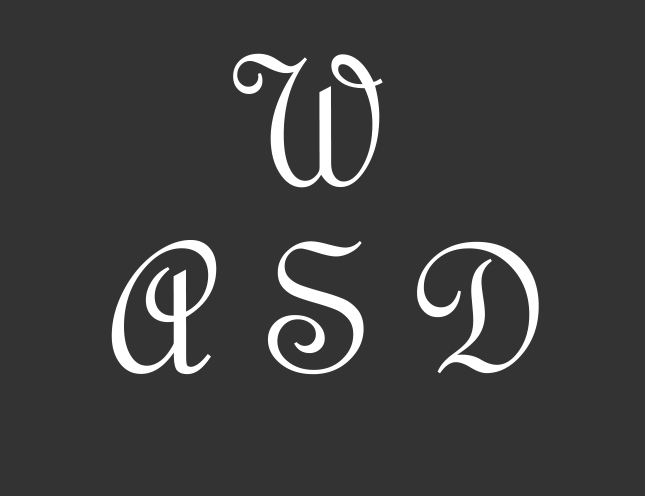
<style>
.page{position:relative;width:645px;height:496px;background:#333333}
.page>*{position:absolute;margin:0}
.t1{font:200px/187px "FrenchScriptMT";color:#ffffff;text-transform:uppercase}
.t2{font:200px/187px "FrenchScriptMT";letter-spacing:-0.04em;color:#ffffff;text-transform:uppercase}
.t3{font:200px/187px "FrenchScriptMT";letter-spacing:0.06em;color:#ffffff;text-transform:uppercase}
.t4{font:200px/187px "FrenchScriptMT";letter-spacing:-0.16em;color:#ffffff;text-transform:uppercase}
</style>
<div class="page">
<p class="t1" style="left:111px;top:53px;width:428px;height:322px;text-align:center">w<br> <span class="t2">A</span><span class="t3"> s</span><span class="t4"> D</span></p>
</div>
